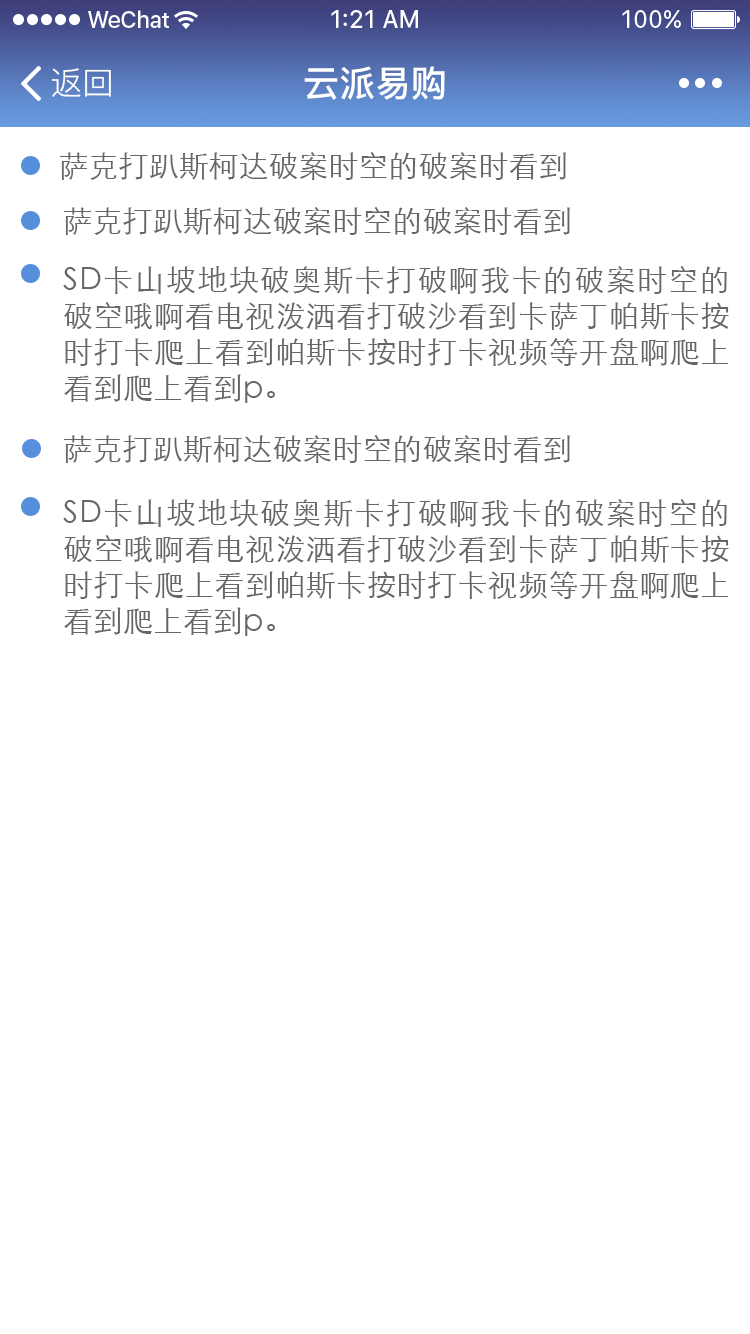
<style>
.page{position:relative;width:750px;height:1334px;background:#ffffff}
.page>*{position:absolute;margin:0}
.t1{font:32px "PingFang-SC-Regular";color:#ffffff}
.t2{font:36px "PingFang-SC-Bold";color:#ffffff}
.t3{font:30px "STXihei";color:#666666}
.t4{font:30px/36px "STXihei";color:#666666}
</style>
<div class="page">
<p class="t1" style="left:52px;top:68px;width:59px;height:29px">返回</p>
<p class="t2" style="left:304px;top:66px;width:141px;height:34px">云派易购</p>
<p class="t3" style="left:60px;top:152px;width:506px;height:28px">萨克打趴斯柯达破案时空的破案时看到</p>
<p class="t3" style="left:64px;top:207px;width:506px;height:28px">萨克打趴斯柯达破案时空的破案时看到</p>
<p class="t4" style="left:63px;top:266px;width:666px;height:137px;text-align:justify">SD卡山坡地块破奥斯卡打破啊我卡的破案时空的破空哦啊看电视泼洒看打破沙看到卡萨丁帕斯卡按时打卡爬上看到帕斯卡按时打卡视频等开盘啊爬上看到爬上看到p。</p>
<p class="t3" style="left:64px;top:435px;width:506px;height:28px">萨克打趴斯柯达破案时空的破案时看到</p>
<p class="t4" style="left:63px;top:499px;width:666px;height:137px;text-align:justify">SD卡山坡地块破奥斯卡打破啊我卡的破案时空的破空哦啊看电视泼洒看打破沙看到卡萨丁帕斯卡按时打卡爬上看到帕斯卡按时打卡视频等开盘啊爬上看到爬上看到p。</p>
</div>
